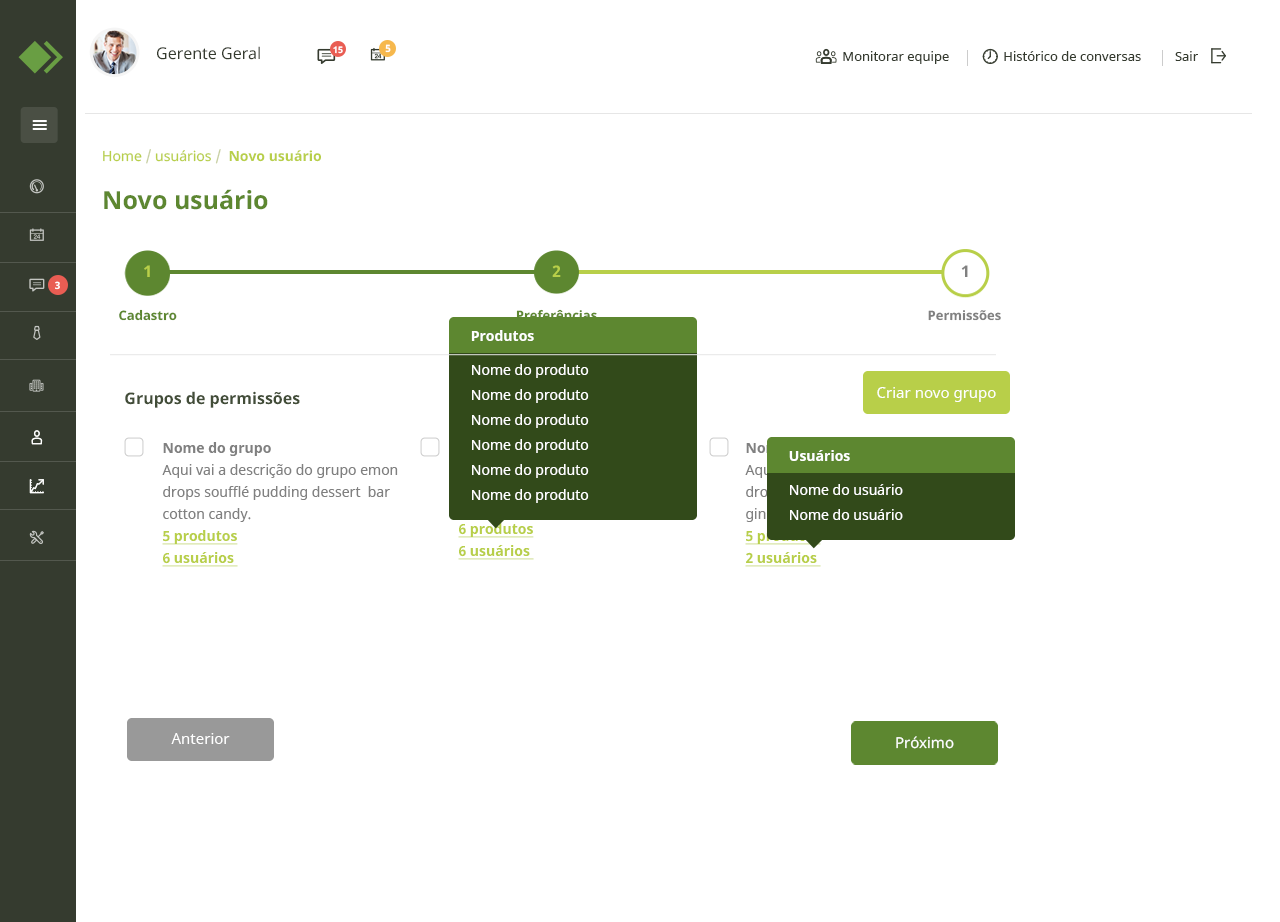
<style>
.page{position:relative;width:1280px;height:922px;background:#ffffff}
.page>*{position:absolute;margin:0}
.t1{font:16px "NotoSans";color:#353b2f}
.t2{font:9px "NotoSans-Bold";color:#ffffff}
.t3{font:10px "NotoSans-Bold";color:#ffffff}
.t4{font:13px "NotoSans";color:#353b2f}
.t5{font:14px "NotoSans-Bold";color:#b8cf49}
.t6{font:14px "NotoSans";color:#b8cf49}
.t7{font:14px "NotoSans";color:#c7cfa1}
.t8{font:25px "NotoSans-Bold";color:#5d8730}
.t9{font:16.1px "NotoSans-Bold";color:#b8cf49}
.t10{font:16.1px "NotoSans-Bold";color:#808080}
.t11{font:13.1px "NotoSans-Bold";color:#5d8730}
.t12{font:13.1px "NotoSans-Bold";color:#808080}
.t13{font:14px/25px "NotoSans";color:#ffffff}
.t14{font:14px "NotoSans-Bold";color:#ffffff}
.t15{font:14px "NotoSans";color:#ffffff}
.t16{font:15px "NotoSans";color:#ffffff}
.t17{font:16px "NotoSans-Bold";color:#424d38}
.t18{font:14px/22px "NotoSans";color:#808080}
.t19{font:14px/40px "NotoSans-Bold";color:#808080}
.t20{font:14px/22px "NotoSans-Bold";color:#b8cf49;text-decoration:underline}
</style>
<div class="page">
<p class="t1" style="left:157px;top:46px;width:103px;height:14px">Gerente Geral</p>
<p class="t2" style="left:333px;top:46px;width:10px;height:8px">15</p>
<p class="t3" style="left:385px;top:44px;width:6px;height:9px">5</p>
<p class="t4" style="left:843px;top:51px;width:355px;height:13px">Monitorar equipe                Histórico de conversas          Sair</p>
<p class="t5" style="left:103px;top:149px;width:218px;height:15px"><span class="t6">Home </span><span class="t7">/</span><span class="t6"> usuários </span><span class="t7">/  </span>Novo usuário</p>
<p class="t8" style="left:104px;top:189px;width:164px;height:21px">Novo usuário</p>
<p class="t9" style="left:144px;top:265px;width:6px;height:12px">1</p>
<p class="t9" style="left:552px;top:265px;width:9px;height:12px">2</p>
<p class="t10" style="left:961px;top:265px;width:7px;height:12px">1</p>
<p class="t3" style="left:55px;top:281px;width:5px;height:9px">3</p>
<p class="t11" style="left:119px;top:309px;width:58px;height:12px">Cadastro</p>
<p class="t11" style="left:516px;top:309px;width:81px;height:12px">Preferências</p>
<p class="t12" style="left:928px;top:310px;width:73px;height:11px">Permissões</p>
<p class="t13" style="left:471px;top:330px;width:118px;height:173px"><span class="t14">Produtos<br></span><span class="t15"><br>Nome do produto<br></span>Nome do produto<br>Nome do produto<br>Nome do produto<br>Nome do produto<br>Nome do produto</p>
<p class="t16" style="left:877px;top:387px;width:119px;height:15px">Criar novo grupo</p>
<p class="t17" style="left:125px;top:391px;width:175px;height:17px">Grupos de permissões</p>
<p class="t18" style="left:162px;top:442px;width:236px;height:125px"><span class="t19">Nome do grupo<br></span>Aqui vai a descrição do grupo emon drops soufflé pudding dessert  bar cotton candy.<br><span class="t20">5 produtos<br>6 usuários</span></p>
<p class="t15" style="left:789px;top:450px;width:114px;height:70px"><span class="t14">Usuários<br></span><br>Nome do usuário<br><span class="t13">Nome do </span>usuário</p>
<p class="t16" style="left:171px;top:733px;width:59px;height:11px">Anterior</p>
<p class="t16" style="left:896px;top:736px;width:58px;height:13px">Próximo</p>
</div>
